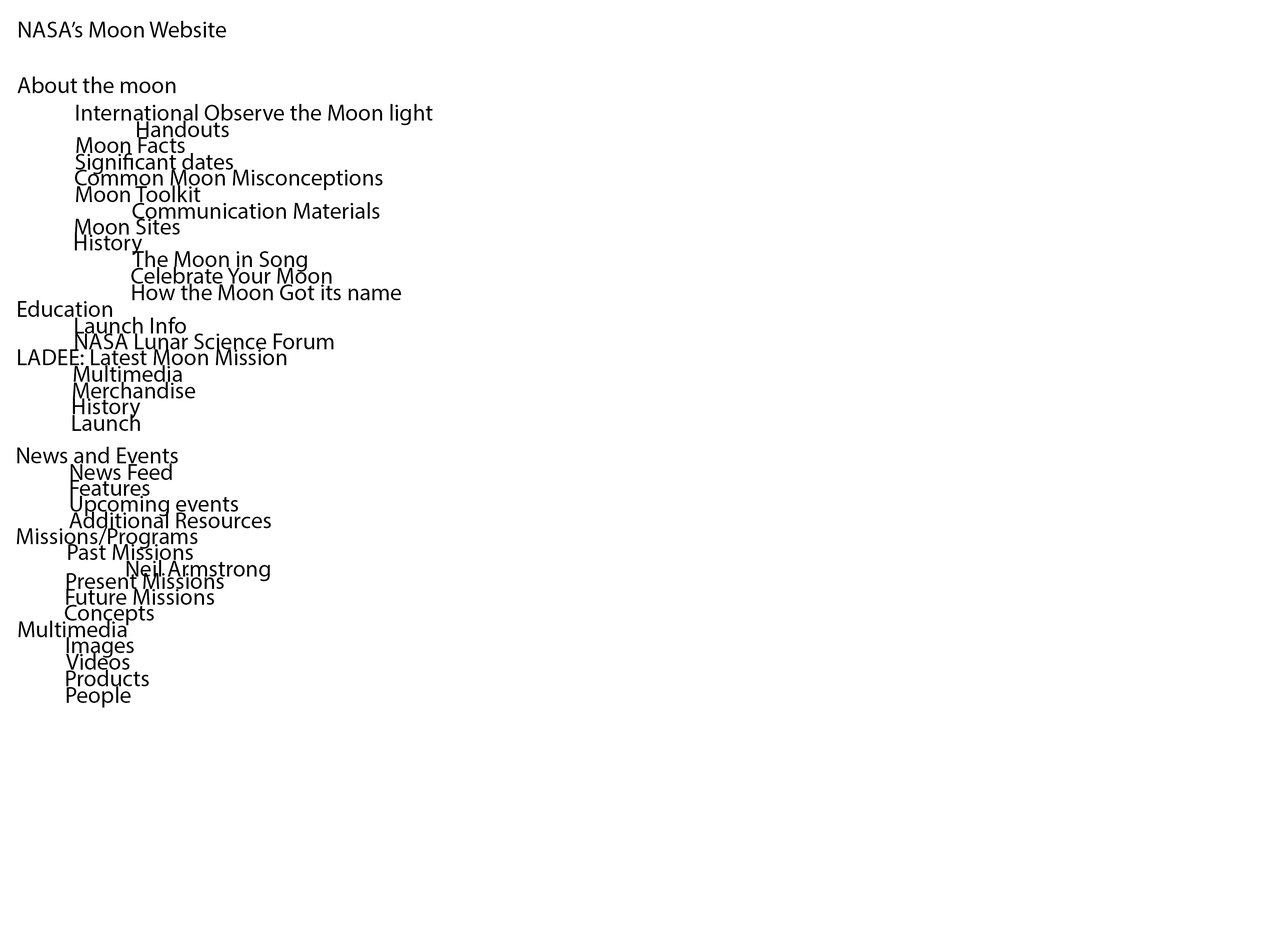
<style>
.page{position:relative;width:1261px;height:946px;background:#ffffff}
.page>*{position:absolute;margin:0}
.t1{font:23.2px "MyriadPro-Regular";color:#000000}
</style>
<div class="page">
<p class="t1" style="left:17px;top:21px;width:209px;height:72px">NASA’s Moon Website<br><br>About the moon</p>
<p class="t1" style="left:76px;top:104px;width:357px;height:21px">International Observe the Moon light</p>
<p class="t1" style="left:137px;top:121px;width:92px;height:16px">Handouts</p>
<p class="t1" style="left:76px;top:137px;width:109px;height:16px">Moon Facts</p>
<p class="t1" style="left:76px;top:153px;width:157px;height:21px">Significant dates</p>
<p class="t1" style="left:75px;top:170px;width:307px;height:20px">Common Moon Misconceptions</p>
<p class="t1" style="left:76px;top:185px;width:124px;height:17px">Moon Toolkit</p>
<p class="t1" style="left:133px;top:202px;width:246px;height:17px">Communication Materials</p>
<p class="t1" style="left:75px;top:219px;width:105px;height:15px">Moon Sites</p>
<p class="t1" style="left:75px;top:234px;width:67px;height:21px">History</p>
<p class="t1" style="left:132px;top:250px;width:175px;height:22px">The Moon in Song</p>
<p class="t1" style="left:131px;top:267px;width:200px;height:17px">Celebrate Your Moon</p>
<p class="t1" style="left:132px;top:284px;width:269px;height:16px">How the Moon Got its name</p>
<p class="t1" style="left:18px;top:300px;width:94px;height:17px">Education</p>
<p class="t1" style="left:75px;top:317px;width:111px;height:16px">Launch Info</p>
<p class="t1" style="left:75px;top:333px;width:258px;height:16px">NASA Lunar Science Forum</p>
<p class="t1" style="left:18px;top:349px;width:268px;height:16px">LADEE: Latest Moon Mission</p>
<p class="t1" style="left:73px;top:365px;width:109px;height:17px">Multimedia</p>
<p class="t1" style="left:73px;top:382px;width:122px;height:16px">Merchandise</p>
<p class="t1" style="left:73px;top:398px;width:67px;height:21px">History</p>
<p class="t1" style="left:72px;top:414px;width:68px;height:17px">Launch</p>
<p class="t1" style="left:17px;top:447px;width:161px;height:16px">News and Events</p>
<p class="t1" style="left:71px;top:463px;width:101px;height:17px">News Feed</p>
<p class="t1" style="left:70px;top:480px;width:80px;height:16px">Features</p>
<p class="t1" style="left:70px;top:496px;width:168px;height:20px">Upcoming events</p>
<p class="t1" style="left:69px;top:511px;width:202px;height:17px">Additional Resources</p>
<p class="t1" style="left:17px;top:528px;width:180px;height:21px">Missions/Programs</p>
<p class="t1" style="left:68px;top:544px;width:125px;height:16px">Past Missions</p>
<p class="t1" style="left:127px;top:560px;width:143px;height:21px">Neil Armstrong</p>
<p class="t1" style="left:66px;top:573px;width:158px;height:16px">Present Missions</p>
<p class="t1" style="left:66px;top:589px;width:148px;height:16px">Future Missions</p>
<p class="t1" style="left:65px;top:605px;width:89px;height:20px">Concepts</p>
<p class="t1" style="left:18px;top:620px;width:109px;height:17px">Multimedia</p>
<p class="t1" style="left:66px;top:637px;width:68px;height:20px">Images</p>
<p class="t1" style="left:66px;top:653px;width:63px;height:16px">Videos</p>
<p class="t1" style="left:66px;top:669px;width:83px;height:17px">Products</p>
<p class="t1" style="left:66px;top:686px;width:65px;height:21px">People</p>
</div>
